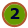
<style>
.page{position:relative;width:28px;height:28px;background:#ffffff}
.page>*{position:absolute;margin:0}
.t1{font:14.7px "Verdana-Bold";color:#000333}
</style>
<div class="page">
<p class="t1" style="left:10px;top:8px;width:10px;height:11px">2</p>
</div>
